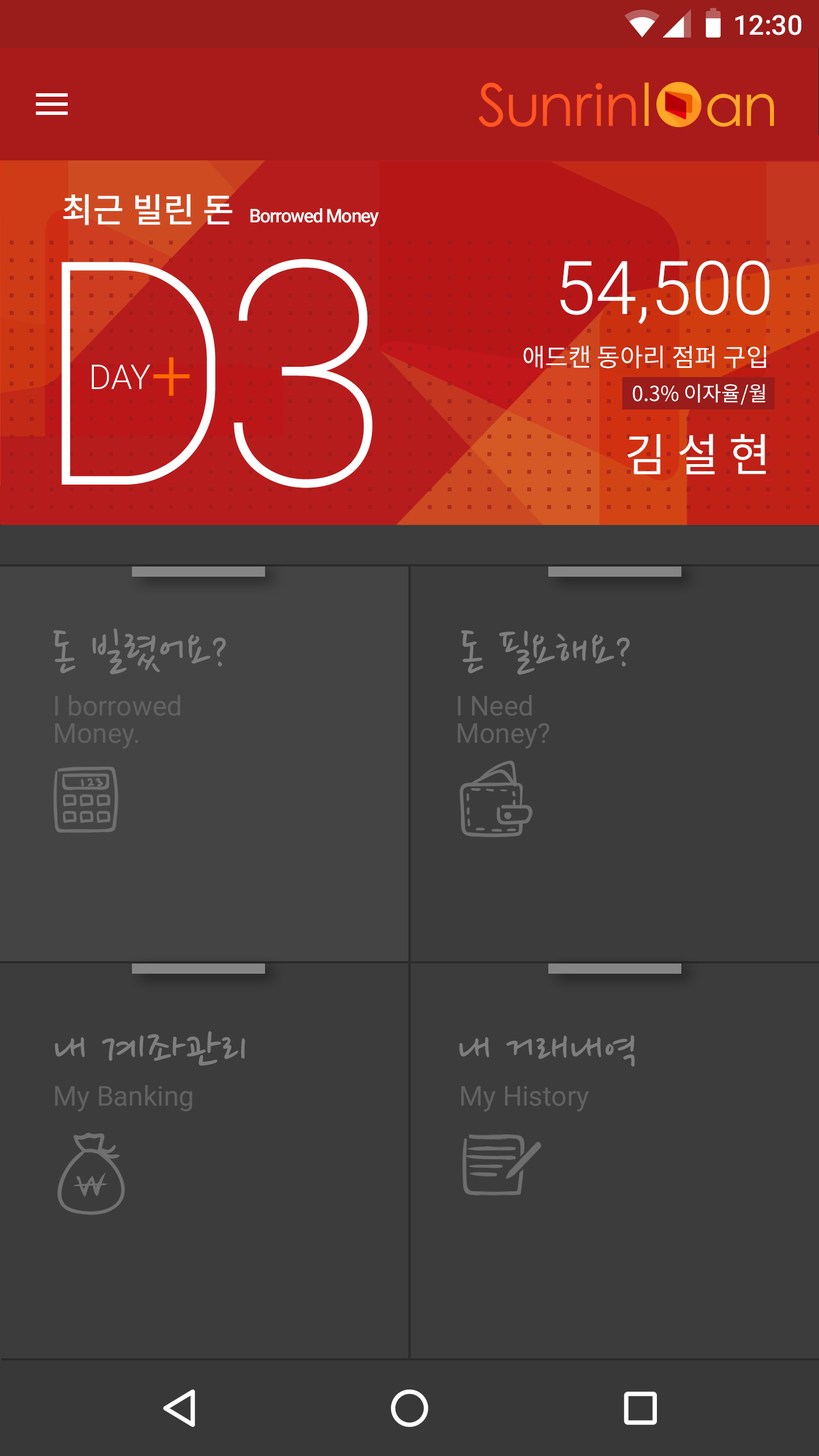
<style>
.page{position:relative;width:819px;height:1456px;background:#3c3c3c}
.page>*{position:absolute;margin:0}
.t1{font:27.3px "Roboto-Medium";color:#ffffff}
.t2{font:34.1px "NotoSansCJKkr-Medium";color:#ffffff}
.t3{font:18.8px "Roboto-Medium";letter-spacing:-0.05em;color:#ffffff}
.t4{font:312.8px "Roboto-Thin";letter-spacing:-0.05em;color:#ffffff}
.t5{font:73.9px "Roboto-Light";color:#ffffff}
.t6{font:25px "NotoSansCJKkr-Regular";color:#ffffff}
.t7{font:20.5px "NotoSansCJKkr-Regular";color:#ffffff}
.t8{font:45.5px "NotoSansCJKkr-Regular";color:#ffffff}
.t9{font:51.2px "NanumPen";color:#7e7e7e}
.t10{font:27.3px/27.3px "Roboto-Regular";color:#616161}
.t11{font:27.3px "Roboto-Regular";color:#616161}
</style>
<div class="page">
<p class="t1" style="left:735px;top:15px;width:66px;height:20px">12:30</p>
<p class="t2" style="left:63px;top:194px;width:170px;height:31px">최근 빌린 돈</p>
<p class="t3" style="left:250px;top:208px;width:129px;height:18px">Borrowed Money</p>
<p class="t4" style="left:234px;top:259px;width:139px;height:229px">3</p>
<p class="t5" style="left:560px;top:260px;width:210px;height:64px">54,500</p>
<p class="t6" style="left:523px;top:345px;width:243px;height:24px">애드캔 동아리 점퍼 구입</p>
<p class="t7" style="left:632px;top:384px;width:134px;height:21px">0.3% 이자율/월</p>
<p class="t8" style="left:627px;top:434px;width:139px;height:40px">김 설 현</p>
<p class="t9" style="left:53px;top:628px;width:173px;height:47px">돈 빌렸어요?</p>
<p class="t9" style="left:461px;top:630px;width:169px;height:45px">돈 필요해요?</p>
<p class="t10" style="left:55px;top:695px;width:125px;height:54px">I borrowed <br>Money.</p>
<p class="t10" style="left:458px;top:695px;width:91px;height:54px">I Need <br>Money?</p>
<p class="t9" style="left:55px;top:1031px;width:190px;height:35px">내 계좌관리</p>
<p class="t9" style="left:459px;top:1035px;width:176px;height:32px">내 거래내역</p>
<p class="t11" style="left:55px;top:1085px;width:137px;height:27px">My Banking</p>
<p class="t11" style="left:461px;top:1086px;width:128px;height:26px">My History</p>
</div>
